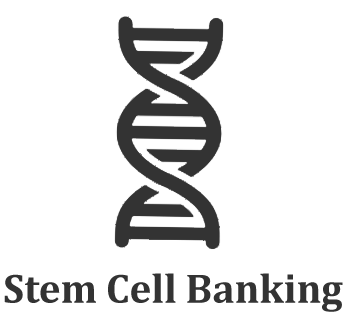
<style>
.page{position:relative;width:348px;height:318px;background:#ffffff}
.page>*{position:absolute;margin:0}
.t1{font:41.8px "Cambria-Bold";color:#333333}
</style>
<div class="page">
<p class="t1" style="left:4px;top:273px;width:339px;height:39px">Stem Cell Banking</p>
</div>
